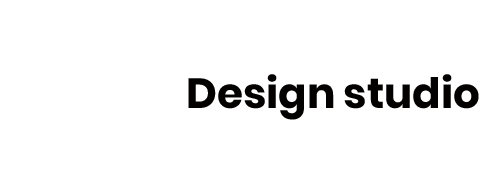
<style>
.page{position:relative;width:479px;height:183px;background:#ffffff}
.page>*{position:absolute;margin:0}
.t1{font:42px "Poppins-Bold";color:#030000}
.t2{font:42px "Poppins-Bold";color:#ffffff}
</style>
<div class="page">
<p class="t1" style="left:57px;top:74px;width:422px;height:46px"><span class="t2">Blend </span>Design studio</p>
</div>
